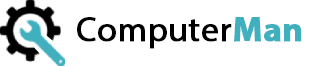
<style>
.page{position:relative;width:314px;height:66px;background:#ffffff}
.page>*{position:absolute;margin:0}
.t1{font:35px "MyriadPro-Regular";color:#000000;font-weight:bold}
.t2{font:35px "MyriadPro-Regular";letter-spacing:0.025em;color:#000000;font-weight:bold}
.t3{font:35px "MyriadPro-Bold";color:#40b0be;font-weight:bold}
</style>
<div class="page">
<p class="t1" style="left:77px;top:17px;width:225px;height:32px">Compute<span class="t2">r</span><span class="t3">Man</span></p>
</div>
